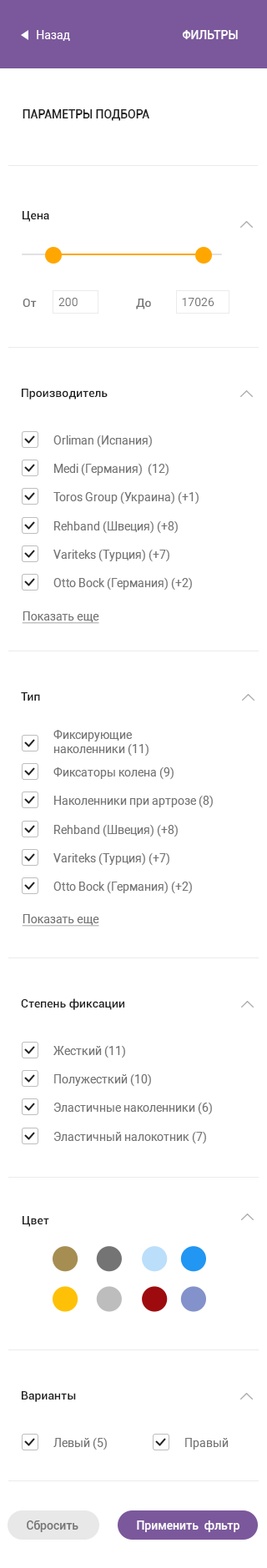
<style>
.page{position:relative;width:267px;height:1568px;background:#ffffff}
.page>*{position:absolute;margin:0}
.t1{font:11.7px "Roboto-Regular";color:#ffffff}
.t2{font:11.7px "Roboto-Medium";color:#ffffff;text-transform:uppercase}
.t3{font:11.7px "Roboto-Medium";color:#212121;text-transform:uppercase}
.t4{font:11.7px "Roboto-Medium";color:#212121}
.t5{font:11.7px "Roboto-Medium";color:#757575}
.t6{font:11.7px "Roboto-Regular";color:#757575}
.t7{font:11.7px "Roboto-Regular";color:#757575;text-decoration:underline}
.t8{font:11.7px "Roboto-Medium";color:#ffffff}
</style>
<div class="page">
<p class="t1" style="left:37px;top:30px;width:33px;height:11px">Назад</p>
<p class="t2" style="left:182px;top:30px;width:56px;height:9px">Фильтры</p>
<p class="t3" style="left:23px;top:109px;width:126px;height:12px">Параметры подбора</p>
<p class="t4" style="left:23px;top:211px;width:26px;height:11px">Цена</p>
<p class="t5" style="left:23px;top:299px;width:14px;height:8px">От</p>
<p class="t6" style="left:58px;top:297px;width:20px;height:10px">200</p>
<p class="t5" style="left:136px;top:299px;width:15px;height:10px">До</p>
<p class="t6" style="left:182px;top:297px;width:32px;height:10px">17026</p>
<p class="t4" style="left:22px;top:389px;width:86px;height:11px">Производитель</p>
<p class="t6" style="left:53px;top:435px;width:99px;height:13px">Orliman (Испания)</p>
<p class="t6" style="left:54px;top:463px;width:114px;height:13px">Medi (Германия)  (12)</p>
<p class="t6" style="left:53px;top:491px;width:146px;height:14px">Toros Group (Украина) (+1)</p>
<p class="t6" style="left:54px;top:520px;width:124px;height:14px">Rehband (Швеция) (+8)</p>
<p class="t6" style="left:53px;top:549px;width:116px;height:13px">Variteks (Турция) (+7)</p>
<p class="t6" style="left:53px;top:577px;width:139px;height:14px">Otto Bock (Германия) (+2)</p>
<p class="t7" style="left:22px;top:611px;width:77px;height:13px">Показать еще</p>
<p class="t4" style="left:21px;top:692px;width:19px;height:9px">Тип</p>
<p class="t6" style="left:53px;top:730px;width:95px;height:26px">Фиксирующие <br>наколенники (11)</p>
<p class="t6" style="left:53px;top:766px;width:120px;height:14px">Фиксаторы колена (9)</p>
<p class="t6" style="left:54px;top:795px;width:159px;height:13px">Наколенники при артрозе (8)</p>
<p class="t6" style="left:54px;top:824px;width:124px;height:13px">Rehband (Швеция) (+8)</p>
<p class="t6" style="left:53px;top:852px;width:116px;height:14px">Variteks (Турция) (+7)</p>
<p class="t6" style="left:53px;top:881px;width:139px;height:13px">Otto Bock (Германия) (+2)</p>
<p class="t7" style="left:22px;top:914px;width:77px;height:13px">Показать еще</p>
<p class="t4" style="left:21px;top:998px;width:103px;height:12px">Степень фиксации</p>
<p class="t6" style="left:53px;top:1045px;width:72px;height:13px">Жесткий (11)</p>
<p class="t6" style="left:54px;top:1073px;width:97px;height:14px">Полужесткий (10)</p>
<p class="t6" style="left:53px;top:1102px;width:159px;height:13px">Эластичные наколенники (6)</p>
<p class="t6" style="left:53px;top:1131px;width:153px;height:13px">Эластичный налокотник (7)</p>
<p class="t4" style="left:23px;top:1216px;width:26px;height:11px">Цвет</p>
<p class="t4" style="left:22px;top:1391px;width:54px;height:11px">Варианты</p>
<p class="t6" style="left:53px;top:1437px;width:54px;height:13px">Левый (5)</p>
<p class="t6" style="left:185px;top:1438px;width:44px;height:12px">Правый</p>
<p class="t5" style="left:27px;top:1520px;width:51px;height:12px">Сбросить</p>
<p class="t8" style="left:137px;top:1520px;width:102px;height:12px">Применить  фльтр</p>
</div>
